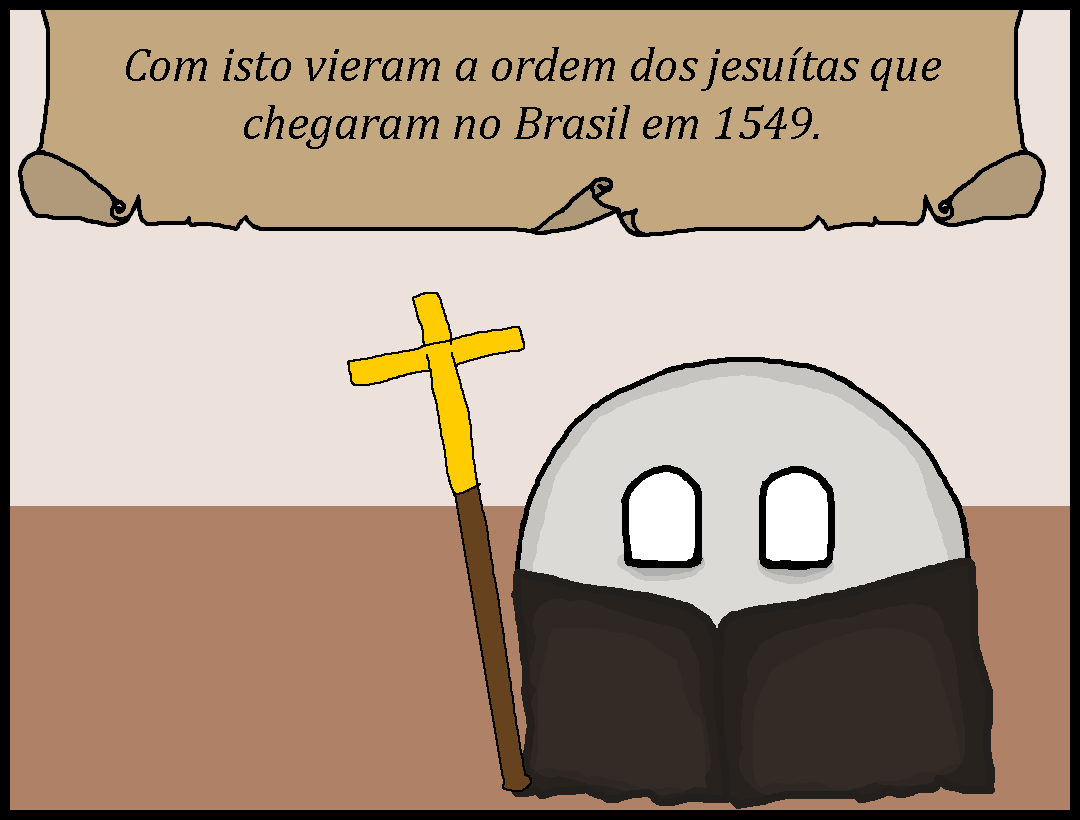
<style>
.page{position:relative;width:1080px;height:820px;background:#ece1db}
.page>*{position:absolute;margin:0}
.t1{font:48px "Cambria-Italic";color:#000000}
</style>
<div class="page">
<p class="t1" style="left:126px;top:47px;width:815px;height:102px;text-align:center">Com isto vieram a ordem dos jesuítas que chegaram no Brasil em 1549.</p>
</div>
